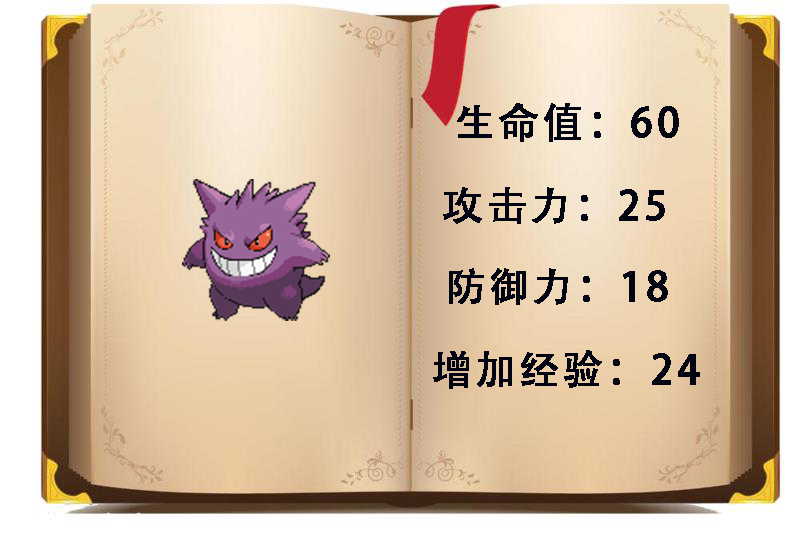
<style>
.page{position:relative;width:800px;height:533px}
.page>*{position:absolute;margin:0}
.t1{font:40px "AdobeHeitiStd-Regular";letter-spacing:0.075em;color:#030411;text-transform:uppercase;font-weight:bold}
</style>
<div class="page">
<p class="t1" style="left:457px;top:103px;width:222px;height:39px">生命值：60</p>
<p class="t1" style="left:443px;top:187px;width:222px;height:37px">攻击力：25</p>
<p class="t1" style="left:449px;top:268px;width:219px;height:37px">防御力：18</p>
<p class="t1" style="left:433px;top:350px;width:267px;height:39px">增加经验：24</p>
</div>
